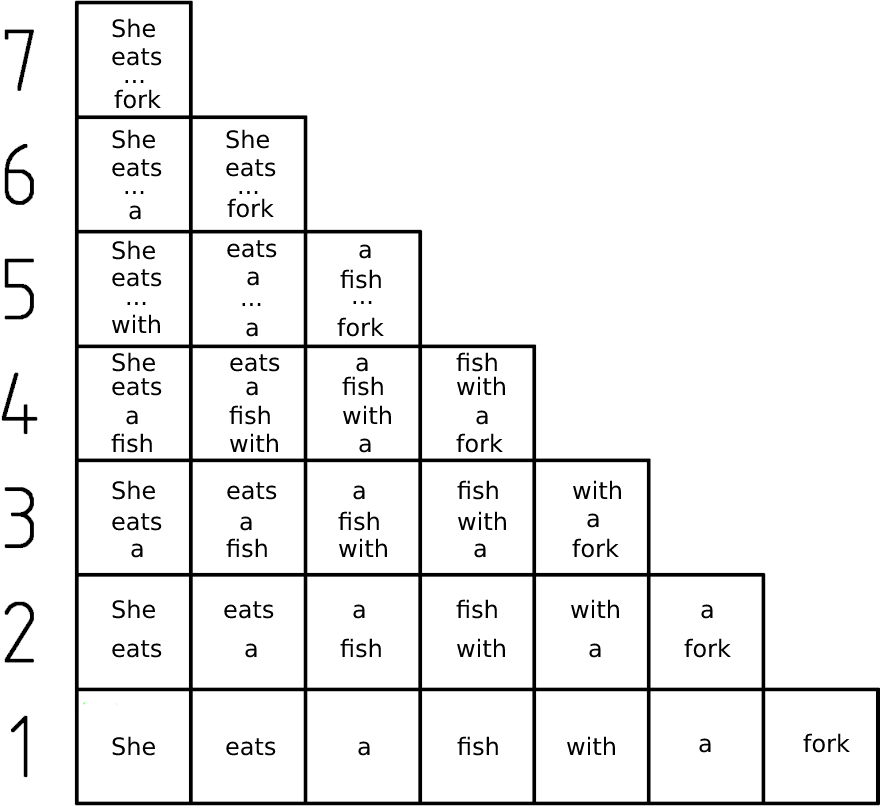
<style>
.page{position:relative;width:880px;height:811px;background:#ffffff}
.page>*{position:absolute;margin:0}
.t1{font:24px "DejaVuSans";color:#000000}
</style>
<div class="page">
<p class="t1" style="left:112px;top:18px;width:43px;height:20px">She</p>
<p class="t1" style="left:112px;top:48px;width:50px;height:18px">eats</p>
<p class="t1" style="left:114px;top:89px;width:47px;height:20px">fork</p>
<p class="t1" style="left:125px;top:80px;width:19px;height:3px">...</p>
<p class="t1" style="left:112px;top:129px;width:43px;height:20px">She</p>
<p class="t1" style="left:226px;top:129px;width:43px;height:20px">She</p>
<p class="t1" style="left:112px;top:159px;width:50px;height:18px">eats</p>
<p class="t1" style="left:226px;top:159px;width:50px;height:18px">eats</p>
<p class="t1" style="left:125px;top:191px;width:19px;height:3px">...</p>
<p class="t1" style="left:227px;top:198px;width:47px;height:20px">fork</p>
<p class="t1" style="left:239px;top:191px;width:19px;height:3px">...</p>
<p class="t1" style="left:129px;top:205px;width:12px;height:15px">a</p>
<p class="t1" style="left:112px;top:240px;width:43px;height:20px">She</p>
<p class="t1" style="left:227px;top:240px;width:50px;height:18px">eats</p>
<p class="t1" style="left:359px;top:244px;width:12px;height:15px">a</p>
<p class="t1" style="left:112px;top:269px;width:50px;height:18px">eats</p>
<p class="t1" style="left:340px;top:269px;width:41px;height:20px">fish</p>
<p class="t1" style="left:247px;top:271px;width:12px;height:15px">a</p>
<p class="t1" style="left:127px;top:302px;width:19px;height:3px">...</p>
<p class="t1" style="left:242px;top:303px;width:19px;height:3px">...</p>
<p class="t1" style="left:353px;top:301px;width:19px;height:3px">...</p>
<p class="t1" style="left:112px;top:314px;width:48px;height:19px">with</p>
<p class="t1" style="left:337px;top:317px;width:47px;height:20px">fork</p>
<p class="t1" style="left:246px;top:322px;width:12px;height:15px">a</p>
<p class="t1" style="left:112px;top:352px;width:43px;height:20px">She</p>
<p class="t1" style="left:456px;top:352px;width:41px;height:20px">fish</p>
<p class="t1" style="left:230px;top:354px;width:50px;height:18px">eats</p>
<p class="t1" style="left:356px;top:357px;width:12px;height:15px">a</p>
<p class="t1" style="left:342px;top:376px;width:41px;height:20px">fish</p>
<p class="t1" style="left:457px;top:376px;width:48px;height:19px">with</p>
<p class="t1" style="left:112px;top:378px;width:50px;height:18px">eats</p>
<p class="t1" style="left:246px;top:381px;width:12px;height:15px">a</p>
<p class="t1" style="left:126px;top:410px;width:12px;height:15px">a</p>
<p class="t1" style="left:229px;top:405px;width:41px;height:20px">fish</p>
<p class="t1" style="left:343px;top:405px;width:48px;height:19px">with</p>
<p class="t1" style="left:476px;top:410px;width:12px;height:15px">a</p>
<p class="t1" style="left:111px;top:433px;width:41px;height:20px">fish</p>
<p class="t1" style="left:230px;top:433px;width:48px;height:19px">with</p>
<p class="t1" style="left:359px;top:438px;width:12px;height:15px">a</p>
<p class="t1" style="left:456px;top:433px;width:47px;height:20px">fork</p>
<p class="t1" style="left:112px;top:480px;width:43px;height:20px">She</p>
<p class="t1" style="left:227px;top:482px;width:50px;height:18px">eats</p>
<p class="t1" style="left:353px;top:485px;width:12px;height:15px">a</p>
<p class="t1" style="left:457px;top:480px;width:41px;height:20px">fish</p>
<p class="t1" style="left:573px;top:480px;width:48px;height:19px">with</p>
<p class="t1" style="left:112px;top:513px;width:50px;height:18px">eats</p>
<p class="t1" style="left:240px;top:516px;width:12px;height:15px">a</p>
<p class="t1" style="left:338px;top:511px;width:41px;height:20px">fish</p>
<p class="t1" style="left:458px;top:511px;width:48px;height:19px">with</p>
<p class="t1" style="left:587px;top:513px;width:12px;height:15px">a</p>
<p class="t1" style="left:131px;top:543px;width:12px;height:15px">a</p>
<p class="t1" style="left:226px;top:538px;width:41px;height:20px">fish</p>
<p class="t1" style="left:339px;top:538px;width:48px;height:19px">with</p>
<p class="t1" style="left:474px;top:543px;width:12px;height:15px">a</p>
<p class="t1" style="left:572px;top:538px;width:47px;height:20px">fork</p>
<p class="t1" style="left:112px;top:599px;width:43px;height:20px">She</p>
<p class="t1" style="left:224px;top:601px;width:50px;height:18px">eats</p>
<p class="t1" style="left:353px;top:604px;width:12px;height:15px">a</p>
<p class="t1" style="left:456px;top:599px;width:41px;height:20px">fish</p>
<p class="t1" style="left:571px;top:599px;width:48px;height:19px">with</p>
<p class="t1" style="left:701px;top:604px;width:12px;height:15px">a</p>
<p class="t1" style="left:112px;top:640px;width:50px;height:18px">eats</p>
<p class="t1" style="left:340px;top:638px;width:41px;height:20px">fish</p>
<p class="t1" style="left:457px;top:638px;width:48px;height:19px">with</p>
<p class="t1" style="left:684px;top:638px;width:47px;height:20px">fork</p>
<p class="t1" style="left:245px;top:643px;width:12px;height:15px">a</p>
<p class="t1" style="left:589px;top:643px;width:12px;height:15px">a</p>
<p class="t1" style="left:112px;top:736px;width:43px;height:20px">She</p>
<p class="t1" style="left:457px;top:736px;width:41px;height:20px">fish</p>
<p class="t1" style="left:567px;top:736px;width:48px;height:19px">with</p>
<p class="t1" style="left:803px;top:733px;width:47px;height:20px">fork</p>
<p class="t1" style="left:226px;top:738px;width:50px;height:18px">eats</p>
<p class="t1" style="left:358px;top:741px;width:12px;height:15px">a</p>
<p class="t1" style="left:699px;top:738px;width:12px;height:15px">a</p>
</div>
